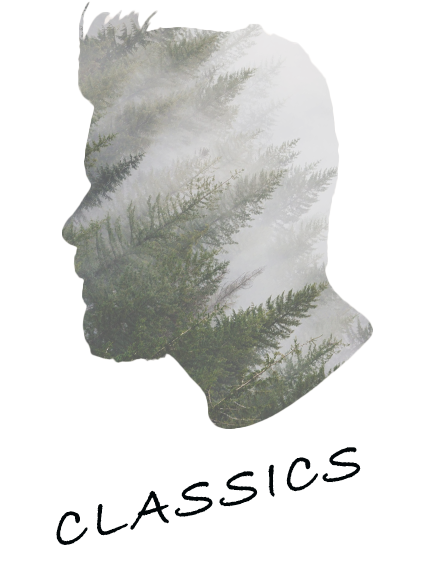
<style>
.page{position:relative;width:433px;height:577px;background:#ffffff}
.page>*{position:absolute;margin:0}
.t1{font:55.6px "BradleyHandITC";letter-spacing:0.075em;color:#010608;font-variant:small-caps;font-weight:bold;font-style:italic}
</style>
<div class="page">
<p class="t1" style="left:56px;top:447px;width:305px;height:98px;rotate:-13deg">CLASSICS</p>
</div>
